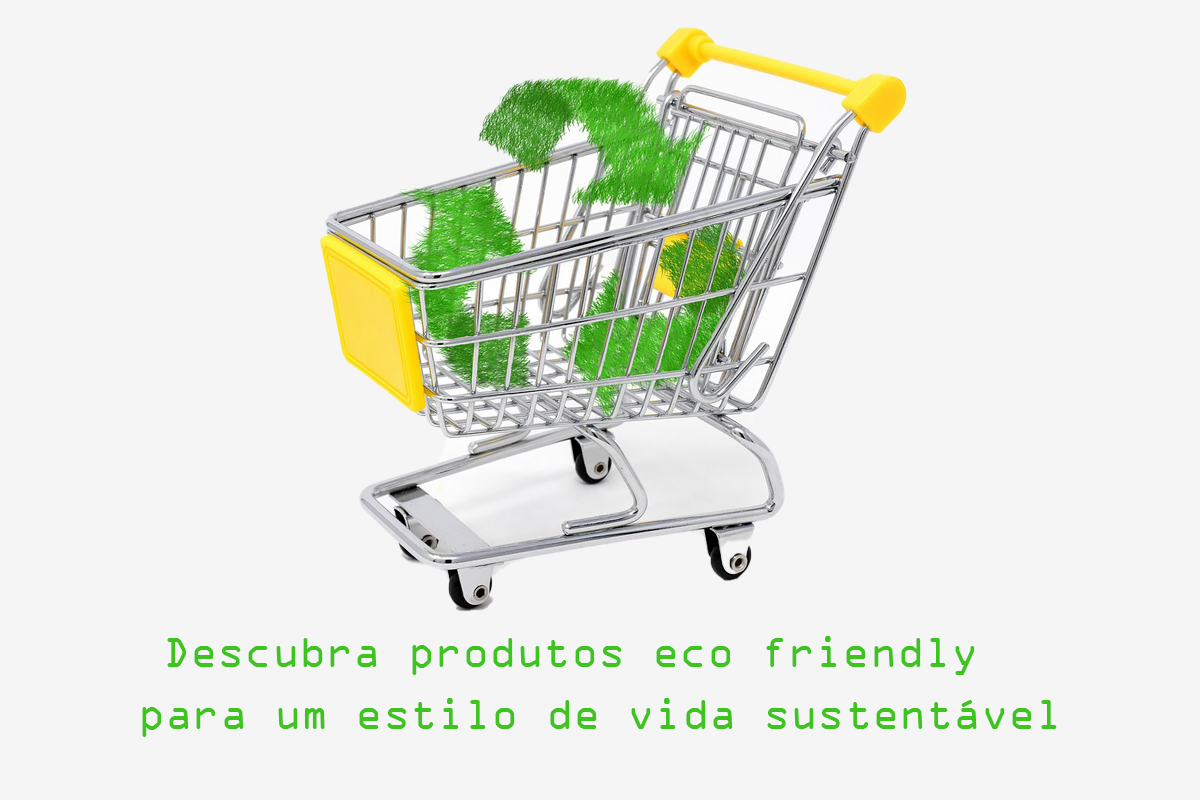
<style>
.page{position:relative;width:1200px;height:800px;background:#f5f5f5}
.page>*{position:absolute;margin:0}
.t1{font:45px "OCRAExtended";color:#3dc41e}
</style>
<div class="page">
<p class="t1" style="left:167px;top:636px;width:808px;height:39px">Descubra produtos eco friendly</p>
<p class="t1" style="left:142px;top:698px;width:915px;height:39px">para um estilo de vida sustentável</p>
</div>
